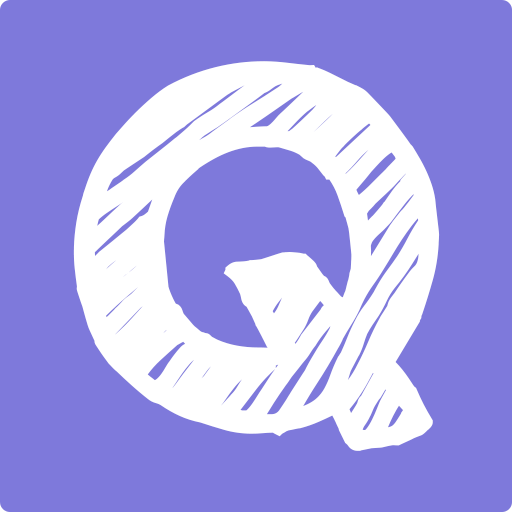
<style>
.page{position:relative;width:512px;height:512px;background:#7e79db}
.page>*{position:absolute;margin:0}
.t1{font:426.7px "KGSecondChancesSketch";color:#ffffff;font-weight:bold}
</style>
<div class="page">
<p class="t1" style="left:73px;top:61px;width:367px;height:390px">Q</p>
</div>
